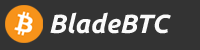
<style>
.page{position:relative;width:200px;height:50px;background:#333333}
.page>*{position:absolute;margin:0}
.t1{font:26.2px "Ubuntu-BoldItalic";color:#fefefe}
</style>
<div class="page">
<p class="t1" style="left:50px;top:12px;width:121px;height:22px">BladeBTC</p>
</div>
